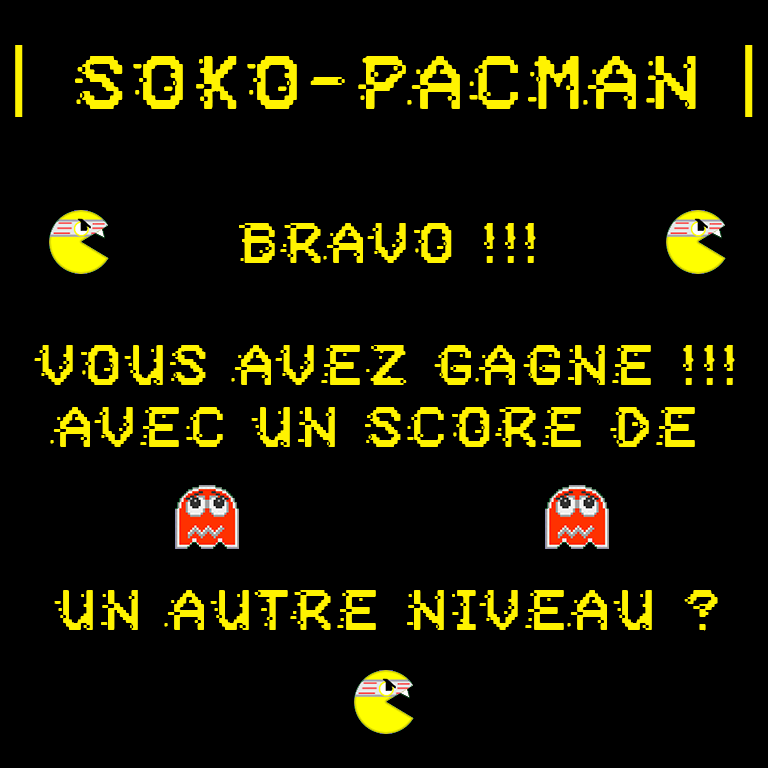
<style>
.page{position:relative;width:768px;height:768px;background:#000000}
.page>*{position:absolute;margin:0}
.t1{font:76.2px "PositiveSystem";letter-spacing:0.2em;color:#fff300;scale:0.89 1}
.t2{font:76.2px "Geometos";letter-spacing:0.2em;color:#fff300;scale:0.89 1}
.t3{font:57.1px "PositiveSystem";letter-spacing:0.2em;color:#fff300;scale:0.89 1}
</style>
<div class="page">
<p class="t1" style="left:15px;top:45px;width:738px;height:72px"><span class="t2">| </span>SOKO-PACMAN <span class="t2">|</span></p>
<p class="t3" style="left:34px;top:223px;width:701px;height:408px;text-align:center">BRAvo !!!<br><br>Vous avez gagné !!!<br>Avec un score de <br><br><br>Un autre niveau ?</p>
</div>
